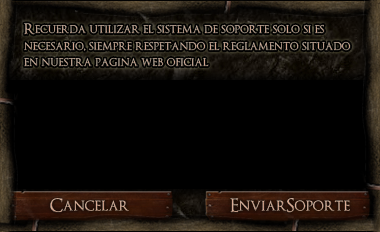
<style>
.page{position:relative;width:380px;height:232px;background:#000000}
.page>*{position:absolute;margin:0}
.t1{font:14px "OptimusPrinceps";color:#d1a48d}
.t2{font:18px "OptimusPrinceps";color:#d8a68e}
.t3{font:18px "OptimusPrinceps";color:#d8a890}
</style>
<div class="page">
<p class="t1" style="left:24px;top:23px;width:327px;height:44px">Recuerda utilizar el sistema de soporte solo si es necesario, siempre respetando el reglamento situado en nuestra pagina web oficial</p>
<p class="t2" style="left:50px;top:198px;width:79px;height:15px">Cancelar</p>
<p class="t3" style="left:230px;top:198px;width:120px;height:15px">EnviarSoporte</p>
</div>
